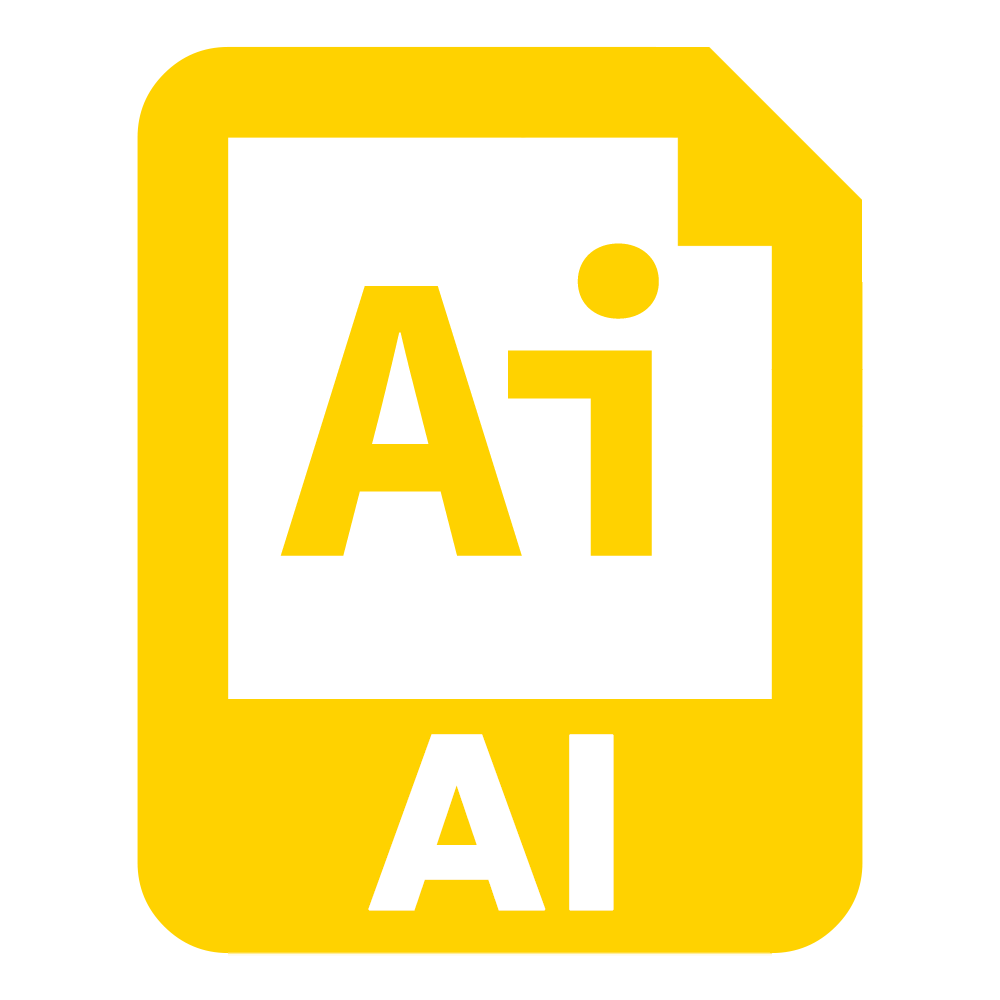
<style>
.page{position:relative;width:1000px;height:1000px;background:#ffffff}
.page>*{position:absolute;margin:0}
.t1{font:413.4px "SourceCodePro-Bold";letter-spacing:-0.12em;color:#ffd200;font-weight:bold}
.t2{font:248px "Poppins-Bold";color:#ffffff;font-weight:bold}
</style>
<div class="page">
<p class="t1" style="left:280px;top:243px;width:379px;height:313px">Ai</p>
<p class="t2" style="left:368px;top:734px;width:246px;height:177px">AI</p>
</div>
